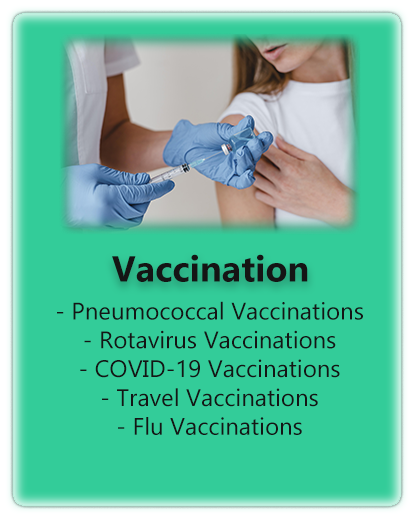
<style>
.page{position:relative;width:420px;height:520px;background:#33cc99}
.page>*{position:absolute;margin:0}
.t1{font:36px "Gadugi-Bold";color:#151515}
.t2{font:24px "Gadugi";color:#151515}
</style>
<div class="page">
<p class="t1" style="left:112px;top:254px;width:196px;height:28px">Vaccination</p>
<p class="t2" style="left:57px;top:301px;width:306px;height:134px;text-align:center">- Pneumococcal Vaccinations<br>- Rotavirus Vaccinations<br>- COVID-19 Vaccinations<br>- Travel Vaccinations<br>- Flu Vaccinations</p>
</div>
